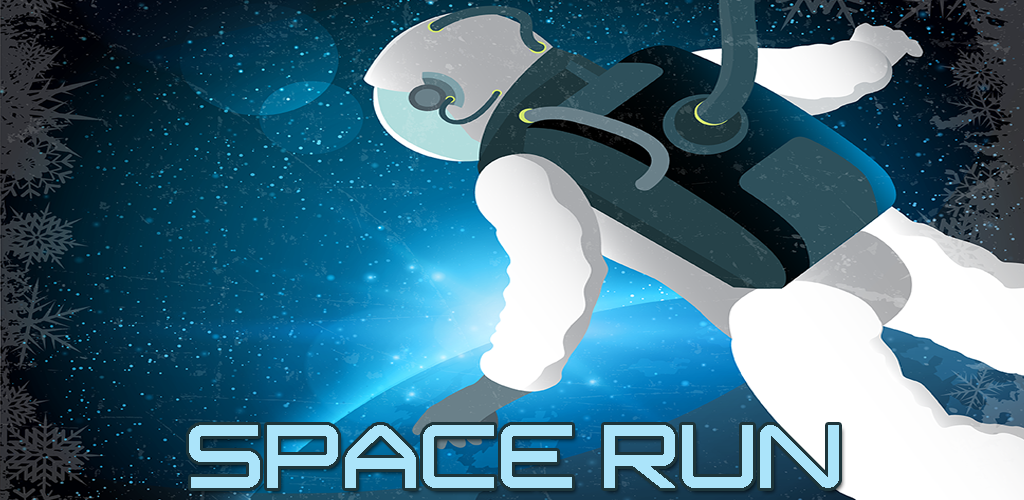
<style>
.page{position:relative;width:1024px;height:500px}
.page>*{position:absolute;margin:0}
.t1{font:150px "ISL_Jupiter";color:#abe4fa}
</style>
<div class="page">
<p class="t1" style="left:189px;top:425px;width:650px;height:63px">SPACE RUN</p>
</div>
